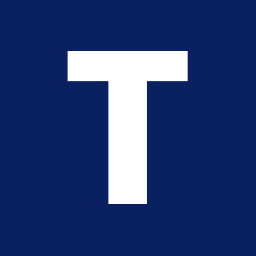
<style>
.page{position:relative;width:256px;height:256px;background:#0a2161}
.page>*{position:absolute;margin:0}
.t1{font:204.8px "MerriweatherSans-ExtraBold";color:#ffffff}
</style>
<div class="page">
<p class="t1" style="left:67px;top:51px;width:121px;height:153px">T</p>
</div>
